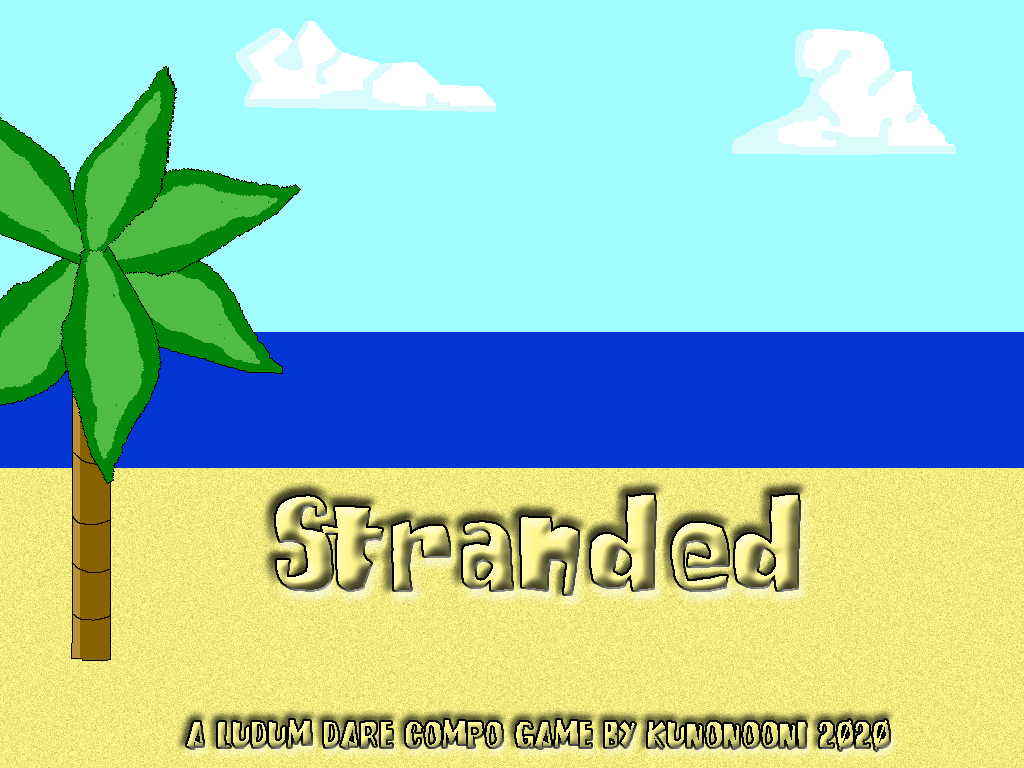
<style>
.page{position:relative;width:1024px;height:768px;background:#a1fcff}
.page>*{position:absolute;margin:0}
.t1{font:36px "SpongeFont-SquareType"}
</style>
<div class="page">
<p class="t1" style="left:187px;top:720px;width:702px;height:30px">A LUDUM DARE COMPO GAME BY KUNONOONI 2020</p>
</div>
